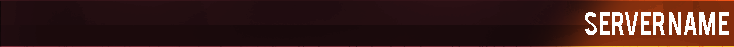
<style>
.page{position:relative;width:734px;height:47px}
.page>*{position:absolute;margin:0}
.t1{font:26px "Bebas";color:#ffffff}
</style>
<div class="page">
<p class="t1" style="left:585px;top:12px;width:144px;height:23px">server name</p>
</div>
